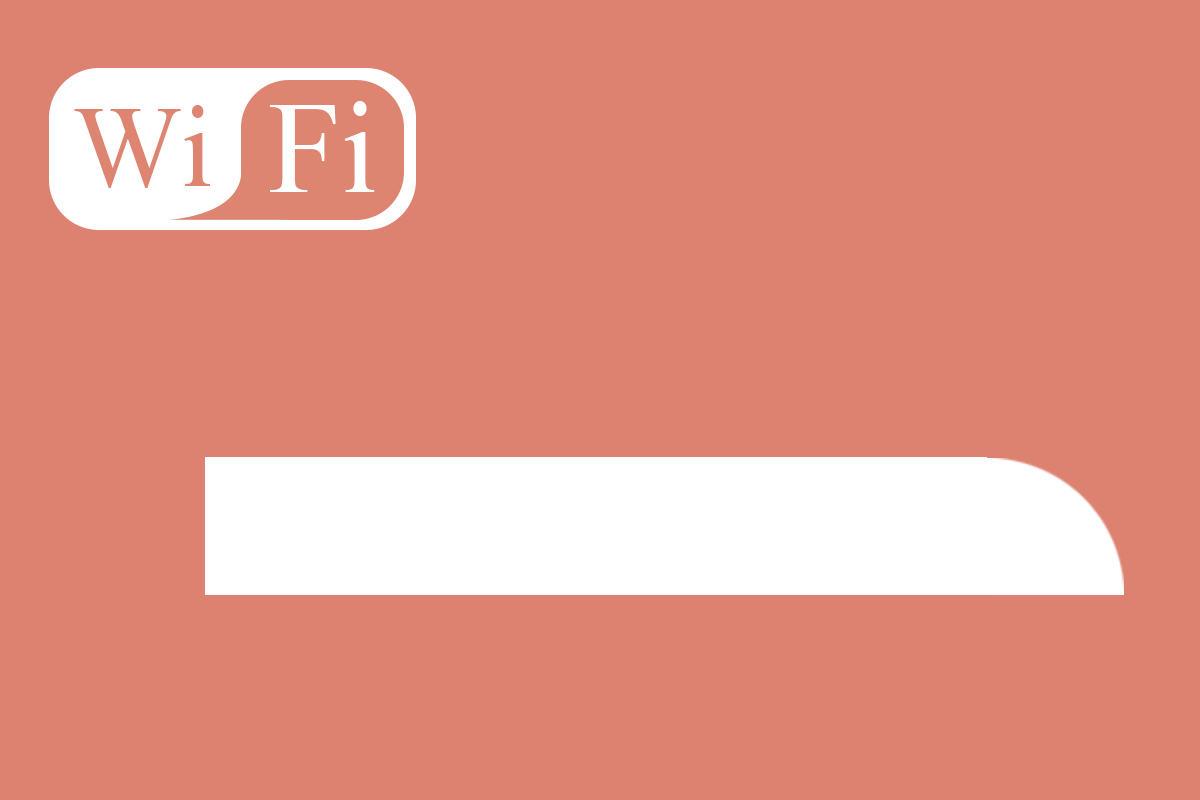
<style>
.page{position:relative;width:1200px;height:800px;background:#dd8271}
.page>*{position:absolute;margin:0}
.t1{font:131px "TimesNewRomanPSMT";color:#ffffff}
.t2{font:115.7px "TimesNewRomanPSMT";color:#dd8571}
</style>
<div class="page">
<p class="t1" style="left:270px;top:101px;width:105px;height:91px">Fi</p>
<p class="t2" style="left:74px;top:105px;width:137px;height:83px">Wi</p>
</div>
